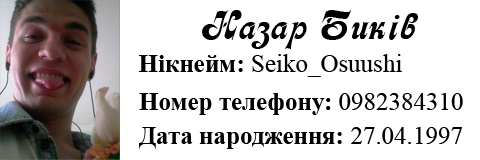
<style>
.page{position:relative;width:480px;height:160px;background:#ffffff}
.page>*{position:absolute;margin:0}
.t1{font:41.7px "Asessor";color:#000000}
.t2{font:25px "TimesNewRomanPSMT";color:#000000}
.t3{font:25px "TimesNewRomanPS-BoldMT";color:#000000}
</style>
<div class="page">
<p class="t1" style="left:202px;top:10px;width:216px;height:39px">Назар Биків</p>
<p class="t2" style="left:139px;top:54px;width:263px;height:23px"><span class="t3">Нікнейм: </span>Seiko_Osuushi</p>
<p class="t3" style="left:139px;top:93px;width:324px;height:22px">Номер телефону: <span class="t2">0982384310</span></p>
<p class="t3" style="left:139px;top:127px;width:323px;height:22px">Дата народження: <span class="t2">27.04.1997</span></p>
</div>
